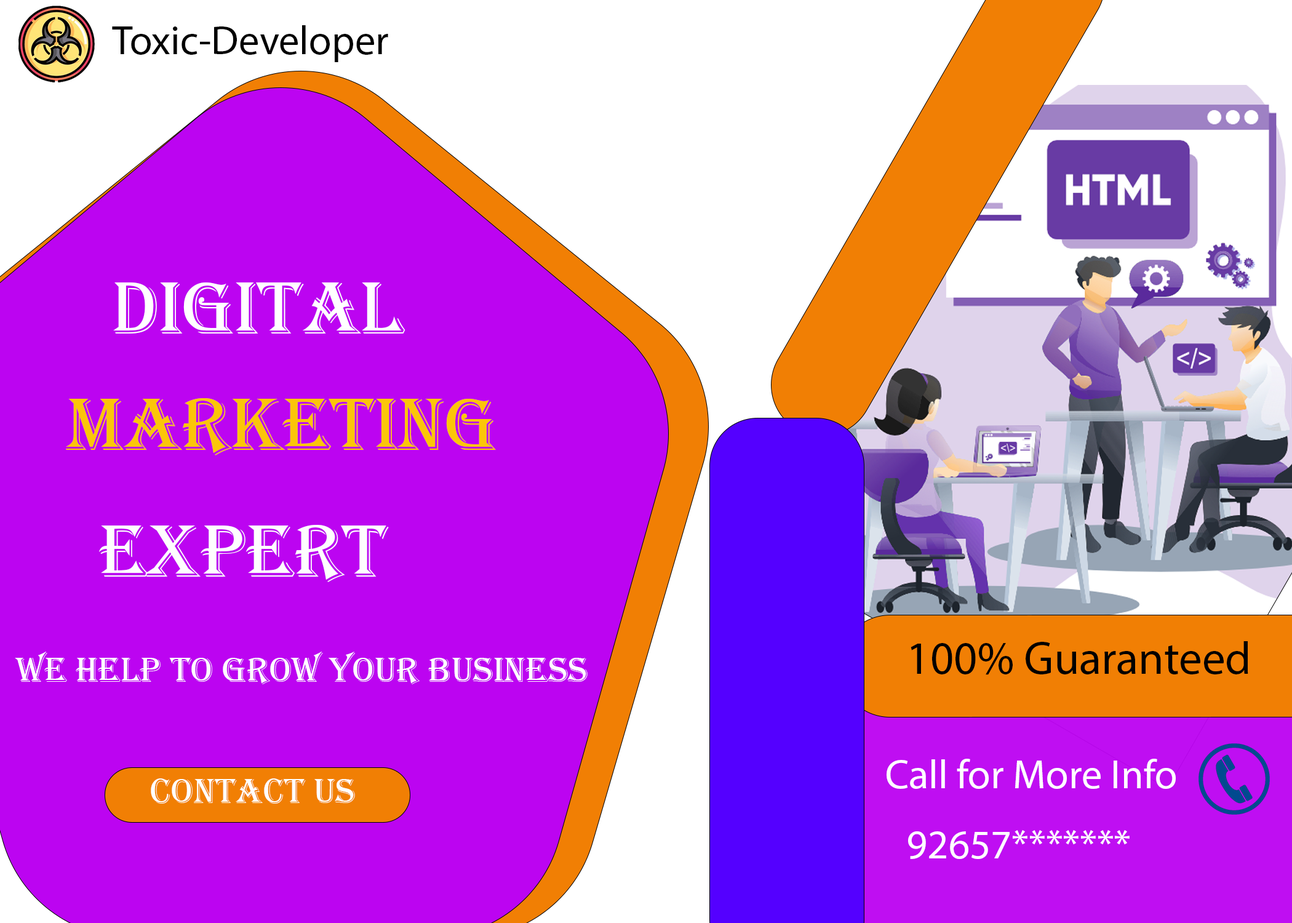
<style>
.page{position:relative;width:1292px;height:923px;background:#bc04f1}
.page>*{position:absolute;margin:0}
.t1{font:41px "MyriadPro-Regular";color:#010101}
.t2{font:76.9px "Algerian";color:#ffffff}
.t3{font:76.9px "Algerian";color:#fbc509}
.t4{font:76.9px "Algerian";color:#fefefe}
.t5{font:46.1px "MyriadPro-Regular";color:#010101}
.t6{font:35.9px "Algerian";color:#fefefe}
.t7{font:41px "MyriadPro-Regular";color:#ffffff}
</style>
<div class="page">
<p class="t1" style="left:112px;top:25px;width:276px;height:37px">Toxic-Developer</p>
<p class="t2" style="left:113px;top:282px;width:292px;height:51px">DIGITAL</p>
<p class="t3" style="left:65px;top:398px;width:431px;height:57px">MARKETING</p>
<p class="t4" style="left:99px;top:525px;width:290px;height:57px">EXPERT</p>
<p class="t5" style="left:911px;top:641px;width:337px;height:34px">100% Guaranteed</p>
<p class="t6" style="left:15px;top:652px;width:573px;height:32px">WE HELP TO GROW YOUR BUSINESS</p>
<p class="t7" style="left:887px;top:759px;width:289px;height:30px">Call for More Info</p>
<p class="t6" style="left:151px;top:778px;width:204px;height:26px">CONTACT US</p>
<p class="t7" style="left:908px;top:830px;width:222px;height:29px">92657*******</p>
</div>
